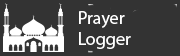
<style>
.page{position:relative;width:180px;height:56px;background:#333333}
.page>*{position:absolute;margin:0}
.t1{font:18px "MyriadPro-Regular";color:#ffffff}
</style>
<div class="page">
<p class="t1" style="left:79px;top:11px;width:52px;height:38px">Prayer             Logger</p>
</div>
